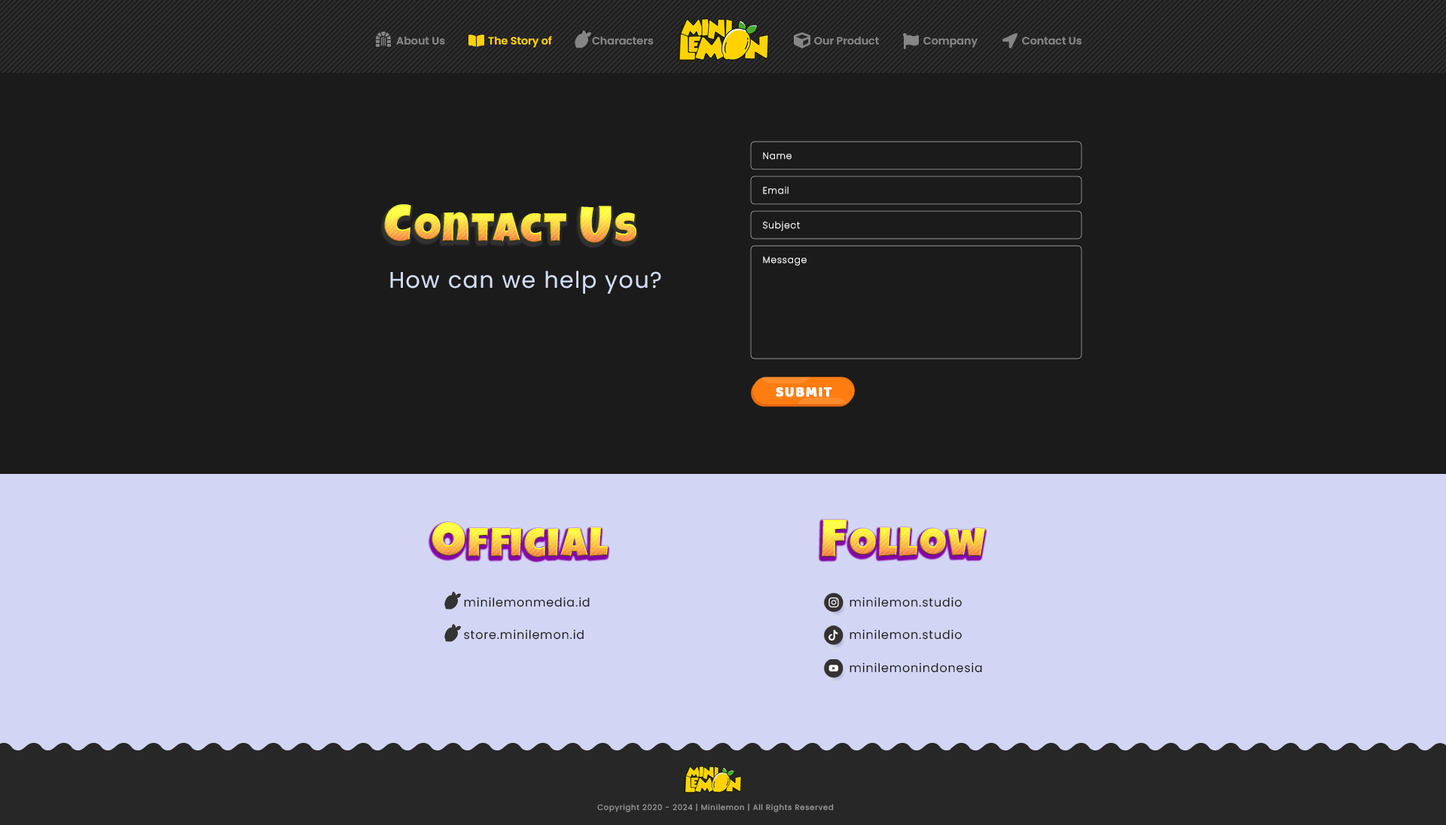
<style>
.page{position:relative;width:1446px;height:825px;background:#1b1b1b}
.page>*{position:absolute;margin:0}
.t1{font:10.5px "Poppins-SemiBold";color:#868686}
.t2{font:10.5px "Poppins-SemiBold";color:#ffd200}
.t3{font:9px "Poppins-ExtraLight";letter-spacing:0.075em;color:#ffffff}
.t4{font:41.4px "LuckiestGuy-Regular";letter-spacing:0.05em}
.t5{font:52.7px "LuckiestGuy-Regular";letter-spacing:0.05em}
.t6{font:22.6px "Poppins-Regular";letter-spacing:0.05em;color:#d3def4}
.t7{font:12px "Poppins-Regular";letter-spacing:0.05em;color:#1b1b1b}
.t8{font:7.5px "Poppins-Regular";letter-spacing:0.075em;color:#9b9b9b}
</style>
<div class="page">
<p class="t1" style="left:396px;top:36px;width:49px;height:9px">About Us</p>
<p class="t2" style="left:488px;top:36px;width:64px;height:11px">The Story of</p>
<p class="t1" style="left:592px;top:36px;width:62px;height:9px">Characters</p>
<p class="t1" style="left:814px;top:36px;width:65px;height:9px">Our Product</p>
<p class="t1" style="left:923px;top:37px;width:55px;height:10px">Company</p>
<p class="t1" style="left:1022px;top:37px;width:59px;height:8px">Contact Us</p>
<p class="t3" style="left:763px;top:152px;width:29px;height:8px">Name</p>
<p class="t3" style="left:763px;top:186px;width:26px;height:8px">Email</p>
<p class="t4" style="left:384px;top:204px;width:252px;height:39px"><span class="t5">C</span>ontact <span class="t5">U</span>s</p>
<p class="t3" style="left:763px;top:221px;width:37px;height:10px">Subject</p>
<p class="t3" style="left:763px;top:256px;width:44px;height:10px">Message</p>
<p class="t6" style="left:390px;top:270px;width:271px;height:24px">How can we help you?</p>
<p class="t4" style="left:432px;top:522px;width:176px;height:35px"><span class="t5">O</span>fficial</p>
<p class="t4" style="left:822px;top:519px;width:163px;height:38px"><span class="t5">F</span>ollow</p>
<p class="t7" style="left:464px;top:596px;width:126px;height:11px">minilemonmedia.id</p>
<p class="t7" style="left:850px;top:596px;width:112px;height:11px">minilemon.studio</p>
<p class="t7" style="left:464px;top:629px;width:120px;height:10px">store.minilemon.id</p>
<p class="t7" style="left:850px;top:629px;width:112px;height:10px">minilemon.studio</p>
<p class="t7" style="left:850px;top:662px;width:132px;height:11px">minilemonindonesia</p>
<p class="t8" style="left:597px;top:803px;width:237px;height:9px">Copyright 2020 - 2024 | Minilemon | All Rights Reserved</p>
</div>
